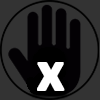
<style>
.page{position:relative;width:100px;height:100px;background:#333333}
.page>*{position:absolute;margin:0}
.t1{font:60px "Calibri-Bold";color:#ffffff;font-weight:bold}
</style>
<div class="page">
<p class="t1" style="left:37px;top:62px;width:28px;height:29px">x</p>
</div>
